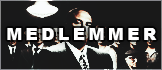
<style>
.page{position:relative;width:162px;height:70px}
.page>*{position:absolute;margin:0}
.t1{font:16.7px "Arial-Black";letter-spacing:0.22em;color:#ffffff}
</style>
<div class="page">
<p class="t1" style="left:7px;top:28px;width:150px;height:12px">MEDLEMMER</p>
</div>
